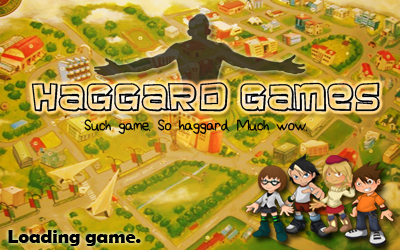
<style>
.page{position:relative;width:400px;height:250px}
.page>*{position:absolute;margin:0}
.t1{font:31px "Baveuse3D";color:#040404}
.t2{font:18px "AmazingBasic";color:#020202}
.t3{font:19.2px "BerlinSansFBDemi-Bold";color:#010101;scale:1.03 1}
</style>
<div class="page">
<p class="t1" style="left:31px;top:82px;width:349px;height:30px">Haggard Games</p>
<p class="t2" style="left:84px;top:119px;width:224px;height:15px">Such game. So haggard. Much wow.</p>
<p class="t3" style="left:8px;top:230px;width:133px;height:16px">Loading game.</p>
</div>
